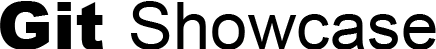
<style>
.page{position:relative;width:436px;height:49px;background:#ffffff}
.page>*{position:absolute;margin:0}
.t1{font:66.5px "ArialMT";color:#000000}
.t2{font:66.5px "Arial-Black";color:#000000}
</style>
<div class="page">
<p class="t1" style="left:0px;top:1px;width:436px;height:49px"><span class="t2">Git </span>Showcase</p>
</div>
